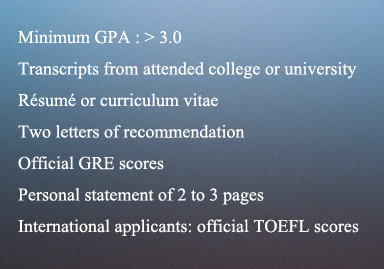
<style>
.page{position:relative;width:384px;height:269px}
.page>*{position:absolute;margin:0}
.t1{font:18px "TimesNewRomanPSMT";color:#ffffff}
</style>
<div class="page">
<p class="t1" style="left:18px;top:30px;width:341px;height:206px">Minimum GPA : &gt; 3.0 <br>Transcripts from attended college or university<br>Résumé or curriculum vitae  <br>Two letters of recommendation <br>Official GRE scores <br>Personal statement of 2 to 3 pages  <br>International applicants: official TOEFL scores</p>
</div>
